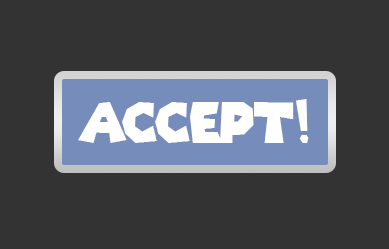
<style>
.page{position:relative;width:389px;height:249px;background:#333333}
.page>*{position:absolute;margin:0}
.t1{font:54.8px "SuperMarioGalaxy";color:#ffffff}
</style>
<div class="page">
<p class="t1" style="left:78px;top:99px;width:231px;height:44px">Accept!</p>
</div>
